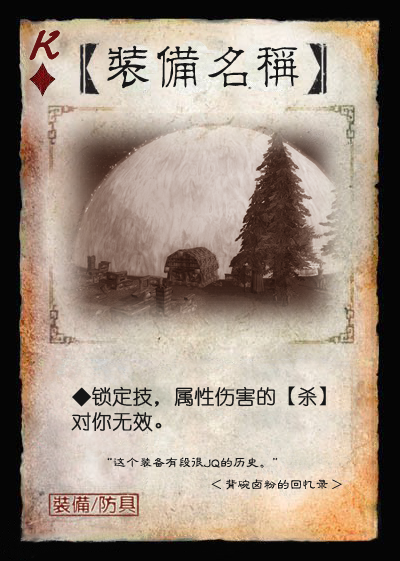
<style>
.page{position:relative;width:400px;height:561px}
.page>*{position:absolute;margin:0}
.t1{font:50px "Jxixinkai";color:#661213;font-weight:bold;font-style:italic}
.t2{font:50px "¾­µä·±½ÇÁ¥ Regular";color:#161616}
.t3{font:20px "YouYuan";color:#161616;font-weight:bold}
.t4{font:20px "DFPWaWaW5";color:#161616;font-weight:bold}
.t5{font:13px "FZLBJW--GB1-0";color:#161616}
</style>
<div class="page">
<p class="t1" style="left:30px;top:30px;width:30px;height:30px">K</p>
<p class="t2" style="left:107px;top:45px;width:192px;height:44px">装备名称</p>
<p class="t3" style="left:72px;top:386px;width:254px;height:21px">◆锁定技，属性伤害的<span class="t4">【</span>杀<span class="t4">】</span></p>
<p class="t3" style="left:71px;top:412px;width:91px;height:20px">对你无效<span class="t4">。</span></p>
<p class="t5" style="left:107px;top:457px;width:171px;height:11px">“这个装备有段很JQ的历史。”</p>
<p class="t5" style="left:211px;top:479px;width:131px;height:11px">&lt; 背碗卤粉的回忆录 &gt;</p>
</div>
